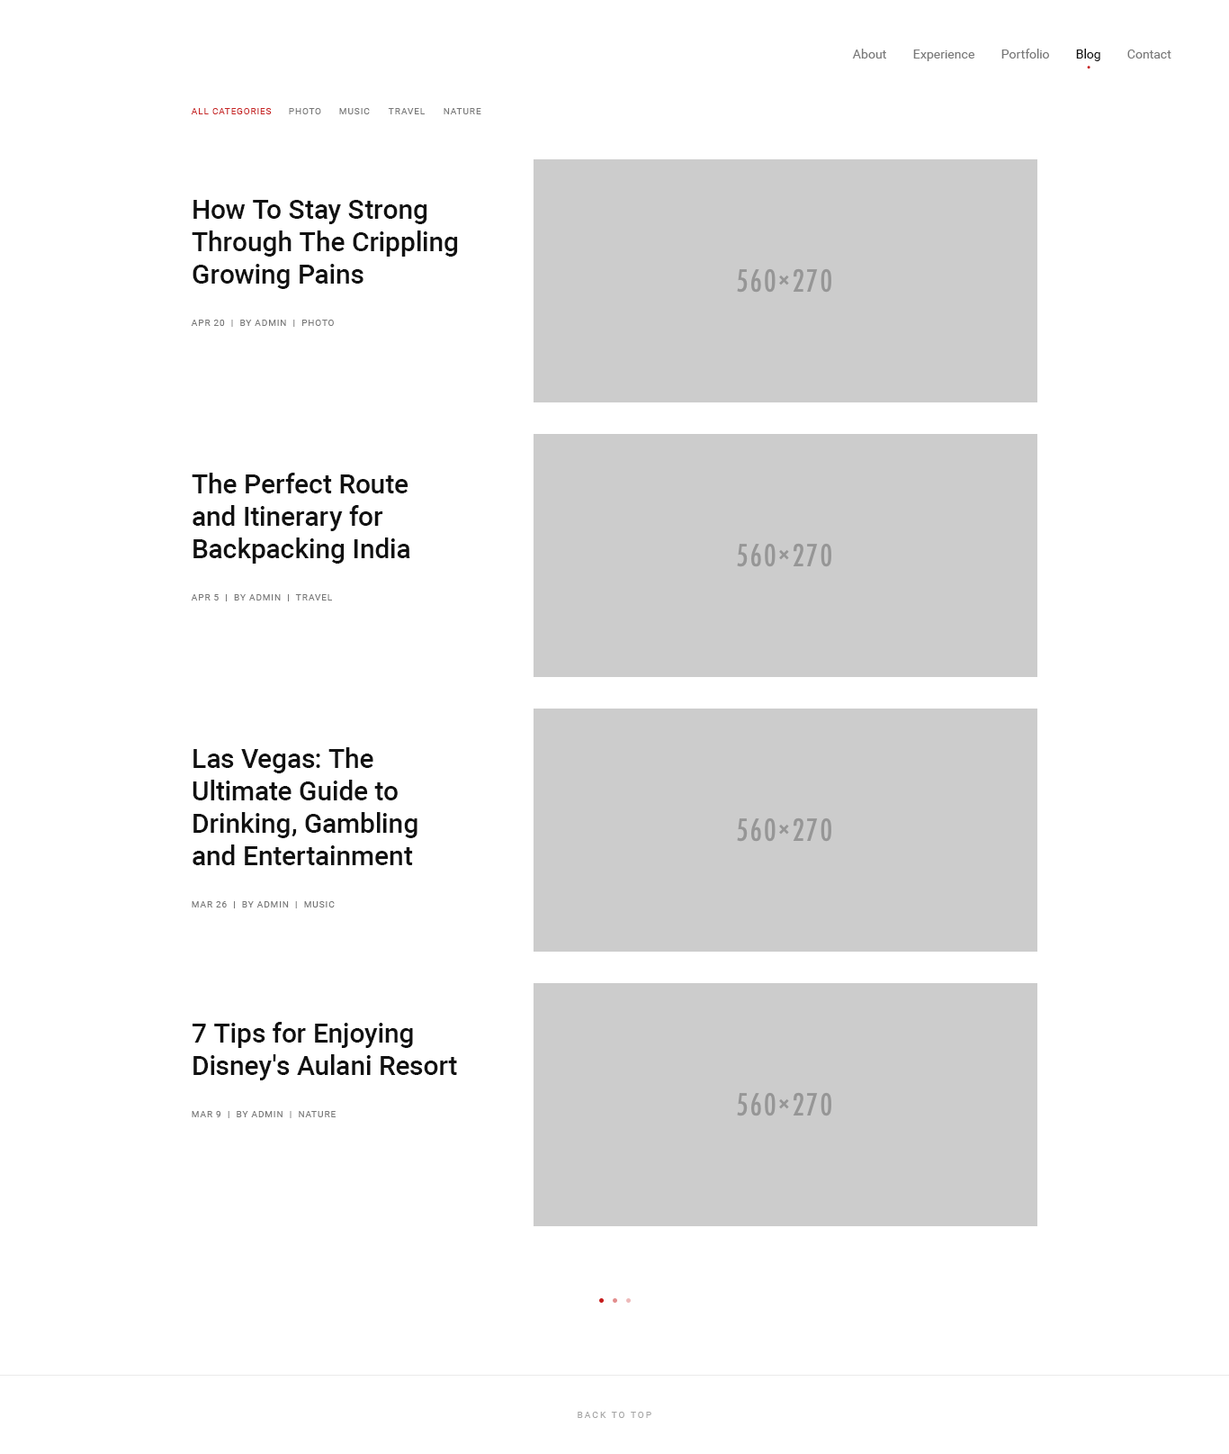
<style>
.page{position:relative;width:1229px;height:1454px;background:#ffffff}
.page>*{position:absolute;margin:0}
.t1{font:12.6px "Roboto-Regular";color:#797979}
.t2{font:12.6px "Roboto-Regular";color:#111111}
.t3{font:9px "Roboto-Regular";letter-spacing:0.075em;color:#c82626;text-transform:uppercase}
.t4{font:9px "Roboto-Regular";letter-spacing:0.075em;color:#797979;text-transform:uppercase}
.t5{font:27px/32.4px "Roboto-Medium";color:#111111}
.t6{font:9px "Roboto-Regular";letter-spacing:0.2em;color:#a6a6a6;text-transform:uppercase}
</style>
<div class="page">
<p class="t1" style="left:852px;top:49px;width:34px;height:9px">About</p>
<p class="t1" style="left:914px;top:50px;width:61px;height:11px">Experience</p>
<p class="t1" style="left:1002px;top:49px;width:47px;height:9px">Portfolio</p>
<p class="t2" style="left:1076px;top:49px;width:25px;height:12px">Blog</p>
<p class="t1" style="left:1128px;top:50px;width:44px;height:8px">Contact</p>
<p class="t3" style="left:191px;top:108px;width:81px;height:6px">All categories</p>
<p class="t4" style="left:289px;top:108px;width:32px;height:6px">Photo</p>
<p class="t4" style="left:339px;top:108px;width:31px;height:6px">Music</p>
<p class="t4" style="left:388px;top:108px;width:37px;height:6px">Travel</p>
<p class="t4" style="left:444px;top:108px;width:38px;height:6px">Nature</p>
<p class="t5" style="left:192px;top:200px;width:266px;height:89px">How To Stay Strong Through The Crippling Growing Pains</p>
<p class="t4" style="left:191px;top:320px;width:143px;height:7px">apr 20  |  by admin  |  Photo</p>
<p class="t5" style="left:192px;top:472px;width:218px;height:91px">The Perfect Route<br>and Itinerary for Backpacking India</p>
<p class="t4" style="left:191px;top:594px;width:141px;height:7px">apr 5  |  by admin  |  travel</p>
<p class="t5" style="left:193px;top:747px;width:225px;height:118px">Las Vegas: The Ultimate Guide to Drinking, Gambling<br>and Entertainment</p>
<p class="t4" style="left:192px;top:901px;width:143px;height:7px">mar 26  |  by admin  |  music</p>
<p class="t5" style="left:193px;top:1022px;width:264px;height:58px">7 Tips for Enjoying Disney's Aulani Resort</p>
<p class="t4" style="left:192px;top:1111px;width:144px;height:7px">mar 9  |  by admin  |  nature</p>
<p class="t6" style="left:578px;top:1411px;width:74px;height:7px">back to top</p>
</div>
